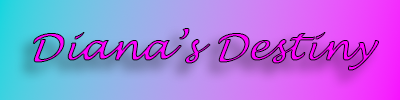
<style>
.page{position:relative;width:400px;height:100px}
.page>*{position:absolute;margin:0}
.t1{font:37px "LucidaHandwriting-Italic";font-weight:bold;font-style:italic}
</style>
<div class="page">
<p class="t1" style="left:33px;top:28px;width:346px;height:43px">Diana’s Destiny</p>
</div>
